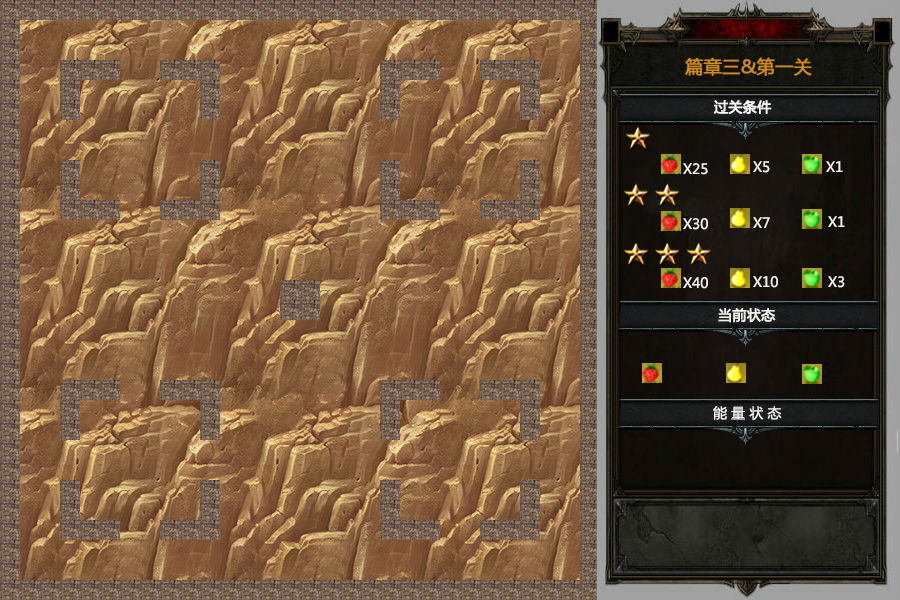
<style>
.page{position:relative;width:900px;height:600px}
.page>*{position:absolute;margin:0}
.t1{font:18px "MicrosoftYaHei";color:#cf8b20;font-weight:bold}
.t2{font:14px "MicrosoftYaHei";color:#f9f3f3;font-weight:bold}
.t3{font:14px "MicrosoftYaHei";color:#f1f0e9}
.t4{font:14px "MicrosoftYaHei";color:#f1f0e9;font-weight:bold}
.t5{font:14px "MicrosoftYaHei";color:#f9f3f3}
</style>
<div class="page">
<p class="t1" style="left:685px;top:57px;width:127px;height:19px">篇章三&amp;第一关</p>
<p class="t2" style="left:714px;top:100px;width:58px;height:15px">过关条件</p>
<p class="t3" style="left:753px;top:161px;width:17px;height:12px">X5</p>
<p class="t3" style="left:826px;top:161px;width:17px;height:11px">X1</p>
<p class="t3" style="left:683px;top:163px;width:25px;height:12px">X25</p>
<p class="t3" style="left:683px;top:218px;width:25px;height:12px">X30</p>
<p class="t3" style="left:753px;top:217px;width:17px;height:11px">X7</p>
<p class="t3" style="left:828px;top:216px;width:17px;height:11px">X1</p>
<p class="t3" style="left:683px;top:277px;width:25px;height:12px">X40</p>
<p class="t3" style="left:753px;top:276px;width:25px;height:12px">X10</p>
<p class="t3" style="left:828px;top:276px;width:17px;height:12px">X3</p>
<p class="t4" style="left:718px;top:308px;width:58px;height:15px">当前状态</p>
<p class="t5" style="left:713px;top:406px;width:69px;height:14px">能 量 状 态</p>
</div>
